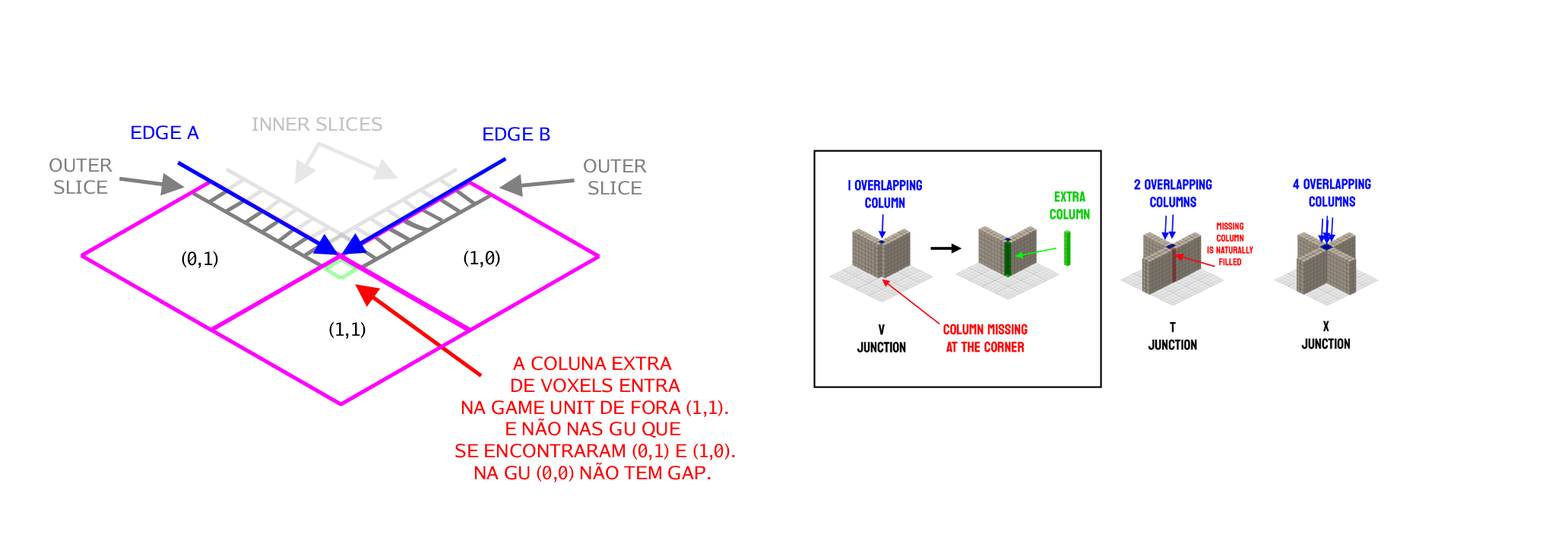
<style>
.page{position:relative;width:1568px;height:537px;background:#ffffff}
.page>*{position:absolute;margin:0}
.t1{font:18.2px "GoSmallcaps";color:#0000ff}
.t2{font:18.2px "GoSmallcaps";color:#c1c1c1}
.t3{font:18.2px "GoSmallcaps";color:#808080}
.t4{font:18.2px "GoSmallcaps";color:#000000}
.t5{font:18.2px "GoSmallcaps";color:#ff0000}
</style>
<div class="page">
<p class="t1" style="left:131px;top:125px;width:68px;height:15px">EDGE A</p>
<p class="t2" style="left:252px;top:117px;width:130px;height:14px">INNER SLICES</p>
<p class="t1" style="left:483px;top:127px;width:67px;height:14px">EDGE B</p>
<p class="t3" style="left:49px;top:158px;width:63px;height:37px;text-align:center">OUTER<br>SLICE</p>
<p class="t3" style="left:584px;top:159px;width:63px;height:36px;text-align:center">OUTER<br>SLICE</p>
<p class="t4" style="left:182px;top:251px;width:36px;height:18px">(0,1)</p>
<p class="t4" style="left:464px;top:250px;width:36px;height:18px">(1,0)</p>
<p class="t4" style="left:329px;top:322px;width:37px;height:18px">(1,1)</p>
<p class="t5" style="left:455px;top:356px;width:280px;height:127px;text-align:center">A COLUNA EXTRA <br>DE VOXELS ENTRA<br>NA GAME UNIT DE FORA (1,1).<br>E NÃO NAS GU QUE <br>SE ENCONTRARAM (0,1) E (1,0).<br>NA GU (0,0) NÃO TEM GAP.</p>
</div>
